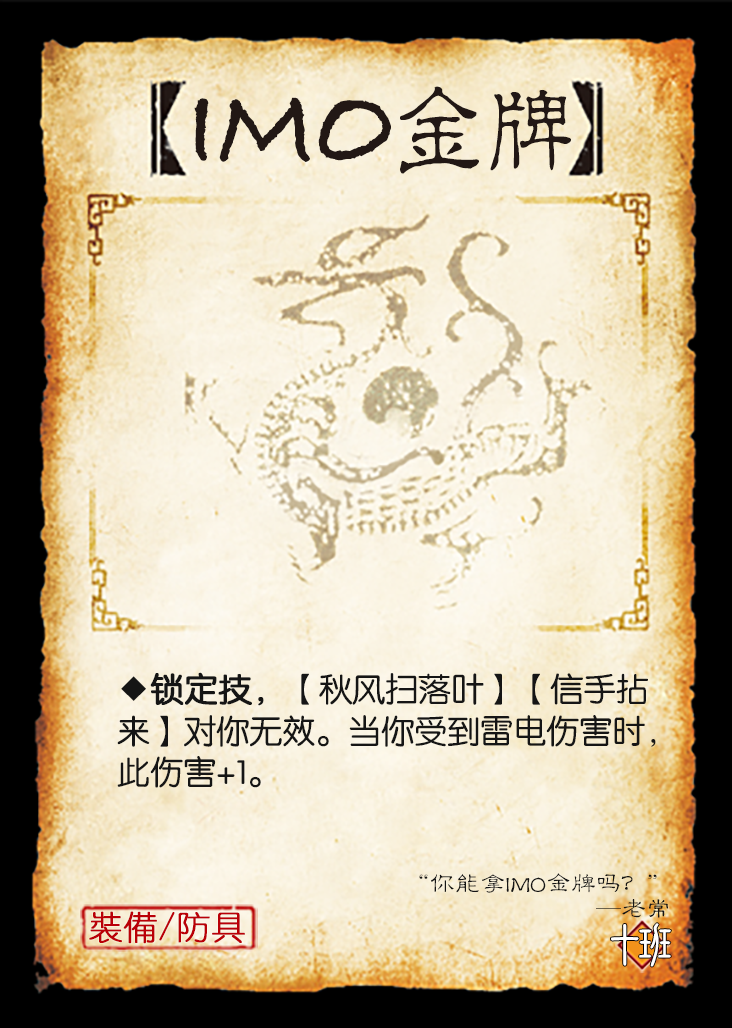
<style>
.page{position:relative;width:732px;height:1028px}
.page>*{position:absolute;margin:0}
.t1{font:116.7px "BradleyHandITCTT-Bold";color:#221815;scale:0.95 1}
.t2{font:95.8px "JMFLS_GBK";color:#221815;scale:0.95 1}
.t3{font:33.3px/41.7px "FZY3JW--GB1-0";letter-spacing:-0.01em;color:#151515}
.t4{font:33.3px/41.7px "FZY3JW--GB1-0";letter-spacing:-0.01em;color:#151515;font-weight:bold}
.t5{font:25px/25px "FZLBJW--GB1-0";color:#151515}
.t6{font:33.3px "YouYuan";color:#ba0007;font-weight:bold}
.t7{font:50px "DFNewChuan-W5-WINP-BF";letter-spacing:-0.4em;color:#ffffff}
</style>
<div class="page">
<p class="t1" style="left:194px;top:86px;width:377px;height:88px">IMO<span class="t2">金牌</span></p>
<p class="t3" style="left:117px;top:672px;width:539px;height:116px">◆<span class="t4">锁定技，</span>【秋风扫落叶】【信手拈<br>来】对你无效。当你受到雷电伤害时，<br>此伤害+1。</p>
<p class="t5" style="left:419px;top:873px;width:249px;height:45px;text-align:right">“你能拿IMO金牌吗？”<br>                                      —老常</p>
<p class="t6" style="left:89px;top:911px;width:156px;height:33px">裝備/防具</p>
<p class="t7" style="left:611px;top:923px;width:60px;height:44px">十班</p>
</div>
